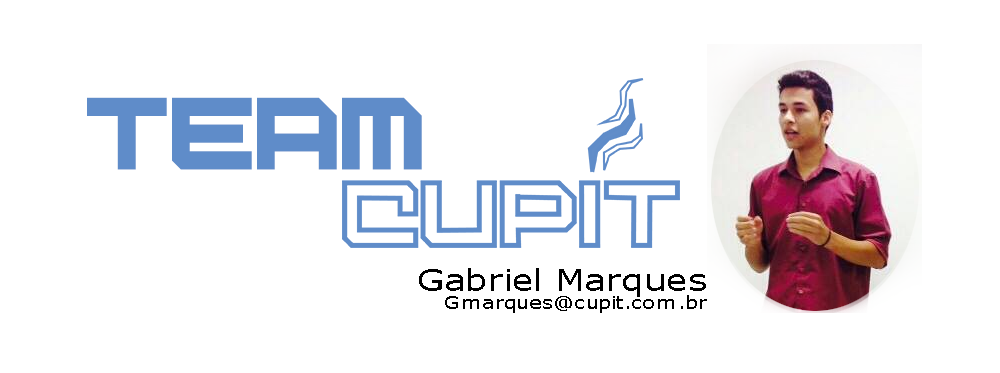
<style>
.page{position:relative;width:1000px;height:373px;background:#ffffff}
.page>*{position:absolute;margin:0}
.t1{font:71.3px "Digital-Desolation";letter-spacing:-0.05em;color:#5f8cc9}
.t2{font:18px/18px "Verdana";color:#000000;scale:1.19 1}
.t3{font:30px/18px "Verdana";color:#000000;scale:1.19 1}
</style>
<div class="page">
<p class="t1" style="left:87px;top:97px;width:335px;height:73px">Team</p>
<p class="t2" style="left:419px;top:268px;width:288px;height:45px;text-align:right"><span class="t3">Gabriel Marques<br></span>Gmarques@cupit.com.br</p>
</div>
